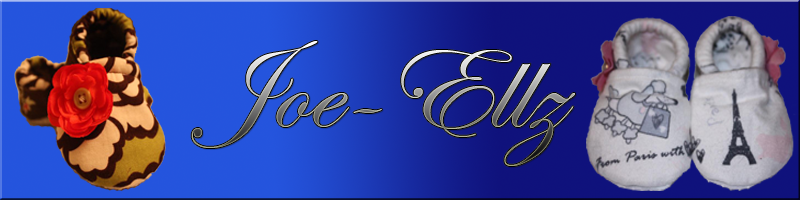
<style>
.page{position:relative;width:800px;height:200px}
.page>*{position:absolute;margin:0}
.t1{font:125px "EdwardianScriptITC"}
</style>
<div class="page">
<p class="t1" style="left:191px;top:41px;width:384px;height:125px">Joe-Ellz</p>
</div>
